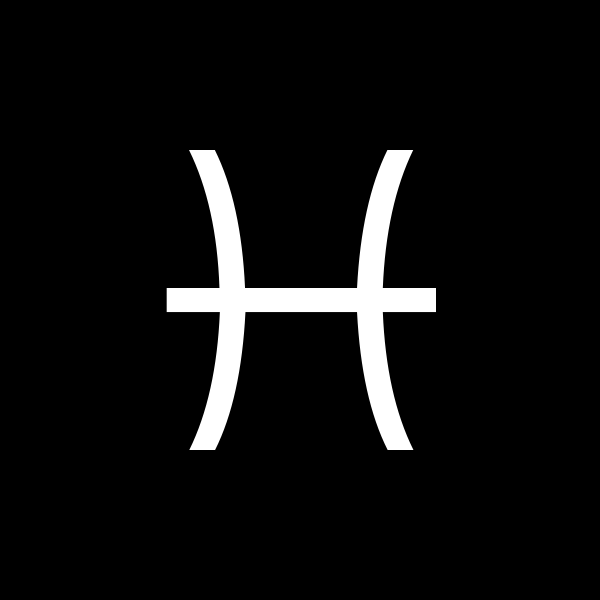
<style>
.page{position:relative;width:600px;height:600px;background:#000000}
.page>*{position:absolute;margin:0}
.t1{font:428.5px "ArialUnicodeMS";color:#ffffff}
</style>
<div class="page">
<p class="t1" style="left:166px;top:150px;width:270px;height:300px">♓︎</p>
</div>
